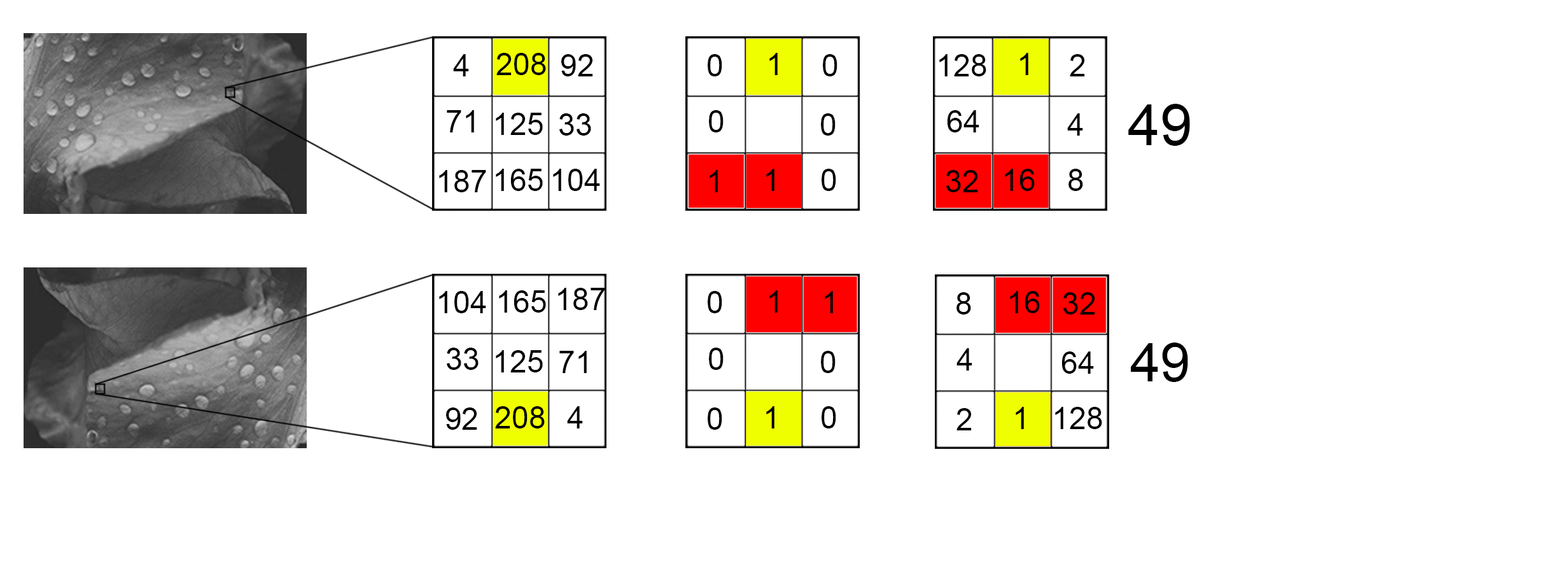
<style>
.page{position:relative;width:1568px;height:573px;background:#ffffff}
.page>*{position:absolute;margin:0}
.t1{font:30.8px "ArialMT";color:#000000}
.t2{font:57.6px "ArialMT";color:#000000}
.t3{font:53.8px "ArialMT";color:#000000}
</style>
<div class="page">
<p class="t1" style="left:496px;top:53px;width:50px;height:22px">208</p>
<p class="t1" style="left:769px;top:53px;width:9px;height:22px">1</p>
<p class="t1" style="left:1020px;top:53px;width:8px;height:22px">1</p>
<p class="t1" style="left:453px;top:54px;width:16px;height:22px">4</p>
<p class="t1" style="left:561px;top:54px;width:32px;height:22px">92</p>
<p class="t1" style="left:708px;top:54px;width:14px;height:22px">0</p>
<p class="t1" style="left:823px;top:54px;width:14px;height:22px">0</p>
<p class="t1" style="left:939px;top:54px;width:47px;height:22px">128</p>
<p class="t1" style="left:1070px;top:54px;width:15px;height:22px">2</p>
<p class="t1" style="left:447px;top:110px;width:27px;height:22px">71</p>
<p class="t1" style="left:496px;top:113px;width:47px;height:22px">125</p>
<p class="t1" style="left:559px;top:113px;width:32px;height:23px">33</p>
<p class="t1" style="left:709px;top:110px;width:15px;height:22px">0</p>
<p class="t1" style="left:821px;top:113px;width:15px;height:23px">0</p>
<p class="t1" style="left:947px;top:110px;width:32px;height:22px">64</p>
<p class="t1" style="left:1067px;top:113px;width:16px;height:23px">4</p>
<p class="t2" style="left:1128px;top:104px;width:62px;height:42px">49</p>
<p class="t1" style="left:439px;top:170px;width:47px;height:22px">187</p>
<p class="t1" style="left:496px;top:169px;width:47px;height:22px">165</p>
<p class="t1" style="left:553px;top:169px;width:47px;height:22px">104</p>
<p class="t1" style="left:710px;top:170px;width:8px;height:22px">1</p>
<p class="t1" style="left:766px;top:169px;width:8px;height:22px">1</p>
<p class="t1" style="left:822px;top:169px;width:14px;height:22px">0</p>
<p class="t1" style="left:946px;top:170px;width:32px;height:22px">32</p>
<p class="t1" style="left:1005px;top:169px;width:30px;height:22px">16</p>
<p class="t1" style="left:1068px;top:169px;width:15px;height:22px">8</p>
<p class="t1" style="left:439px;top:291px;width:47px;height:22px">104</p>
<p class="t1" style="left:499px;top:290px;width:47px;height:22px">165</p>
<p class="t1" style="left:558px;top:288px;width:47px;height:22px">187</p>
<p class="t1" style="left:708px;top:291px;width:14px;height:22px">0</p>
<p class="t1" style="left:769px;top:290px;width:9px;height:22px">1</p>
<p class="t1" style="left:825px;top:291px;width:8px;height:22px">1</p>
<p class="t1" style="left:956px;top:292px;width:15px;height:22px">8</p>
<p class="t1" style="left:1010px;top:291px;width:30px;height:22px">16</p>
<p class="t1" style="left:1063px;top:292px;width:32px;height:22px">32</p>
<p class="t1" style="left:447px;top:347px;width:32px;height:23px">33</p>
<p class="t1" style="left:496px;top:350px;width:47px;height:22px">125</p>
<p class="t1" style="left:559px;top:351px;width:28px;height:22px">71</p>
<p class="t1" style="left:709px;top:347px;width:15px;height:23px">0</p>
<p class="t1" style="left:821px;top:351px;width:15px;height:22px">0</p>
<p class="t1" style="left:956px;top:348px;width:16px;height:22px">4</p>
<p class="t1" style="left:1061px;top:351px;width:33px;height:23px">64</p>
<p class="t3" style="left:1131px;top:342px;width:57px;height:40px">49</p>
<p class="t1" style="left:446px;top:407px;width:31px;height:23px">92</p>
<p class="t1" style="left:495px;top:406px;width:50px;height:22px">208</p>
<p class="t1" style="left:567px;top:406px;width:16px;height:22px">4</p>
<p class="t1" style="left:708px;top:407px;width:14px;height:23px">0</p>
<p class="t1" style="left:766px;top:406px;width:8px;height:22px">1</p>
<p class="t1" style="left:822px;top:406px;width:14px;height:22px">0</p>
<p class="t1" style="left:956px;top:408px;width:16px;height:22px">2</p>
<p class="t1" style="left:1016px;top:407px;width:8px;height:22px">1</p>
<p class="t1" style="left:1055px;top:407px;width:47px;height:22px">128</p>
</div>
